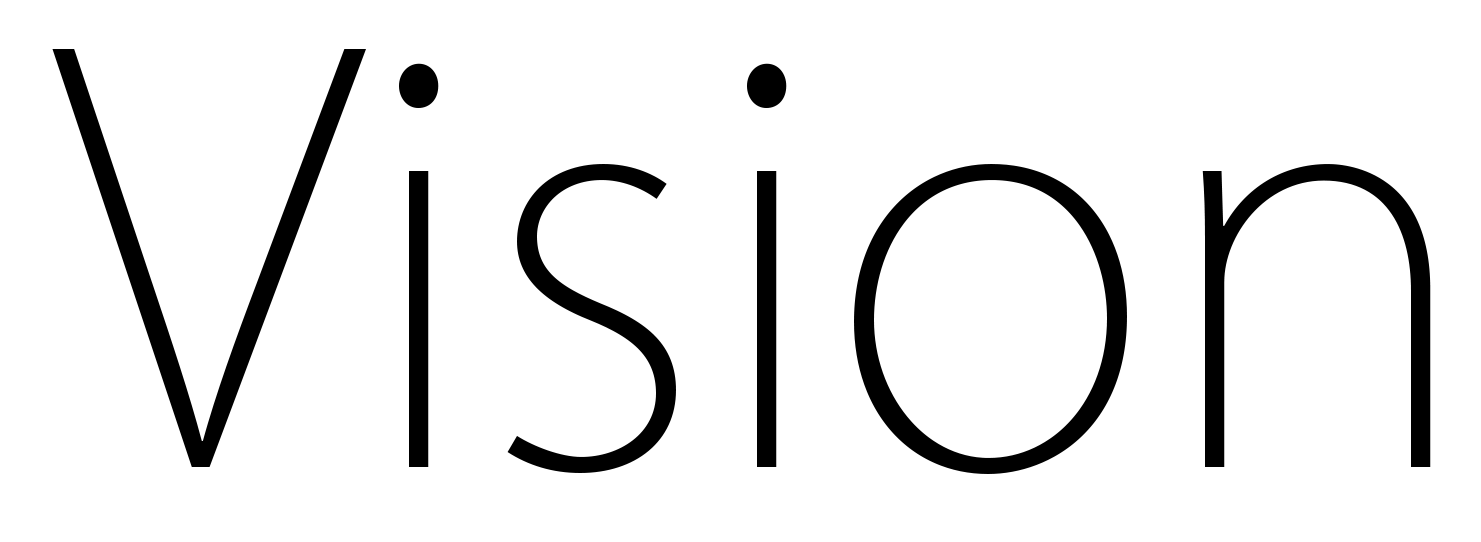
<style>
.page{position:relative;width:1481px;height:542px;background:#ffffff}
.page>*{position:absolute;margin:0}
.t1{font:552.8px "KozGoPr6N-ExtraLight";color:#000000}
</style>
<div class="page">
<p class="t1" style="left:52px;top:49px;width:1379px;height:425px">Vision</p>
</div>
